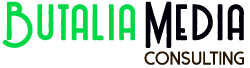
<style>
.page{position:relative;width:250px;height:68px;background:#ffffff}
.page>*{position:absolute;margin:0}
.t1{font:57.2px "BillionaireMediumGrunge";letter-spacing:0.05em;color:#00d747;font-weight:bold}
.t2{font:57.2px "BillionaireMediumGrunge";letter-spacing:0.05em;color:#00000a;font-weight:bold}
.t3{font:17.8px "DolceVita";letter-spacing:0.05em;color:#261300;font-weight:bold}
</style>
<div class="page">
<p class="t1" style="left:2px;top:1px;width:242px;height:47px">Butalia <span class="t2">Media</span></p>
<p class="t3" style="left:144px;top:51px;width:100px;height:14px">consulting</p>
</div>
